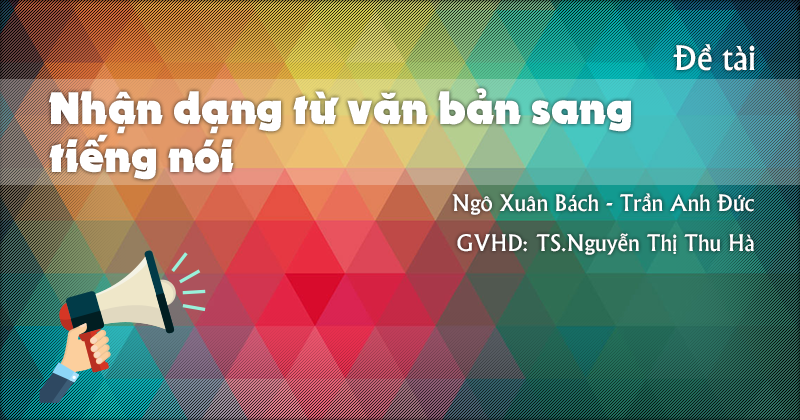
<style>
.page{position:relative;width:800px;height:420px}
.page>*{position:absolute;margin:0}
.t1{font:36px "UTM-Khuccamta";color:#ffffff}
.t2{font:41.3px/24px "UTM-Loko";color:#ffffff}
.t3{font:24.3px "UTM-Khuccamta";color:#ffffff}
</style>
<div class="page">
<p class="t1" style="left:673px;top:44px;width:82px;height:27px">Đề tài</p>
<p class="t2" style="left:48px;top:88px;width:583px;height:92px">Nhận dạng từ văn bản sang<br><br>tiếng nói</p>
<p class="t3" style="left:452px;top:193px;width:302px;height:22px">Ngô Xuân Bách - Trần Anh Đức</p>
<p class="t3" style="left:457px;top:233px;width:297px;height:22px">GVHD: TS.Nguyễn Thị Thu Hà</p>
</div>
